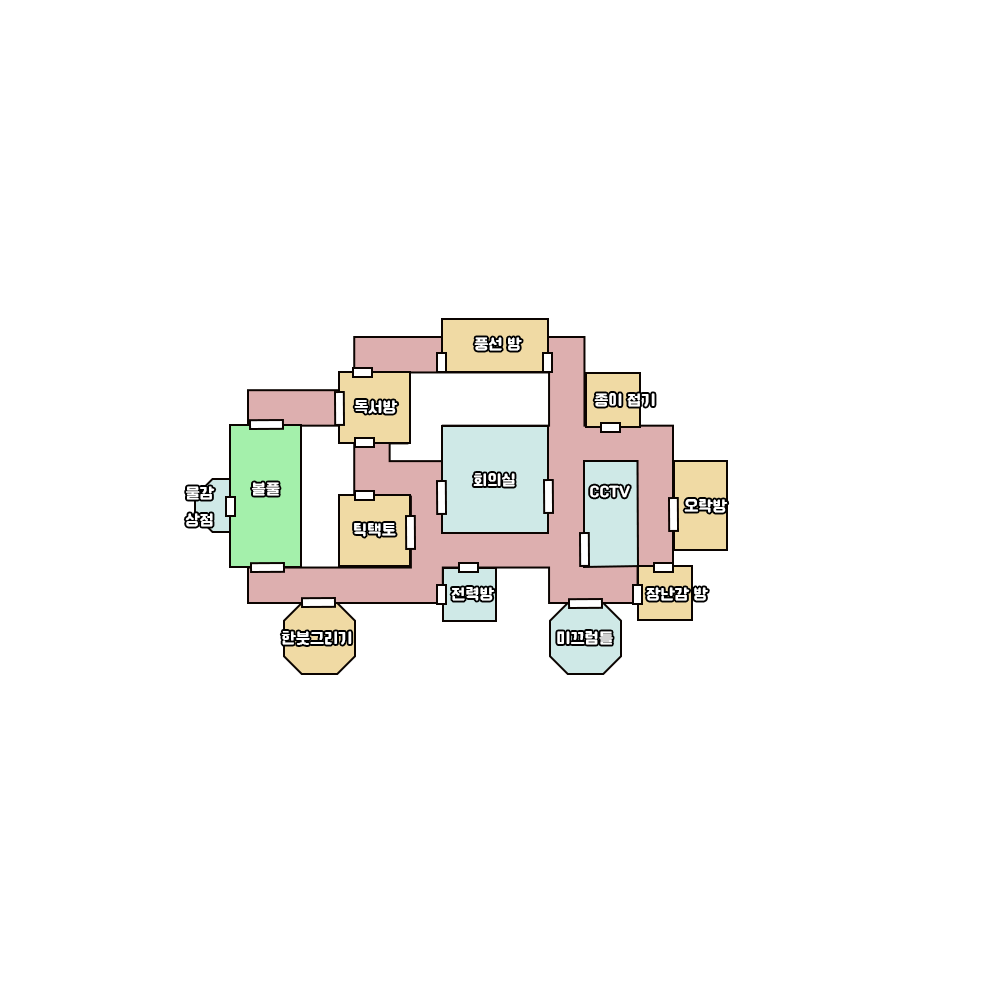
<style>
.page{position:relative;width:1000px;height:1000px;background:#ffffff}
.page>*{position:absolute;margin:0}
.t1{font:15px "Cafe24Ssurround";color:#ffffff}
</style>
<div class="page">
<p class="t1" style="left:474px;top:337px;width:48px;height:14px">풍선 방</p>
<p class="t1" style="left:354px;top:400px;width:44px;height:14px">독서방</p>
<p class="t1" style="left:594px;top:393px;width:61px;height:14px">종이 접기</p>
<p class="t1" style="left:473px;top:473px;width:42px;height:14px">회의실</p>
<p class="t1" style="left:185px;top:486px;width:30px;height:41px">물감<br>상점</p>
<p class="t1" style="left:252px;top:482px;width:28px;height:14px">볼풀</p>
<p class="t1" style="left:590px;top:485px;width:40px;height:13px">CCTV</p>
<p class="t1" style="left:684px;top:499px;width:44px;height:14px">오락방</p>
<p class="t1" style="left:354px;top:523px;width:42px;height:14px">틱택토</p>
<p class="t1" style="left:451px;top:587px;width:44px;height:14px">전력방</p>
<p class="t1" style="left:646px;top:587px;width:62px;height:14px">장난감 방</p>
<p class="t1" style="left:281px;top:631px;width:71px;height:14px">한붓그리기</p>
<p class="t1" style="left:557px;top:631px;width:56px;height:14px">미끄럼틀</p>
</div>
